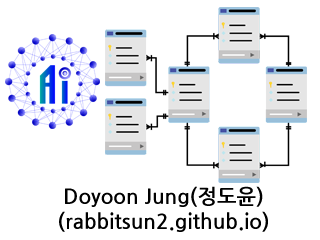
<style>
.page{position:relative;width:320px;height:240px;background:#ffffff}
.page>*{position:absolute;margin:0}
.t1{font:20.8px "NanumGothicBold";color:#000000}
</style>
<div class="page">
<p class="t1" style="left:59px;top:186px;width:209px;height:46px;text-align:center">Doyoon Jung(정도윤)<br>(rabbitsun2.github.io)</p>
</div>
